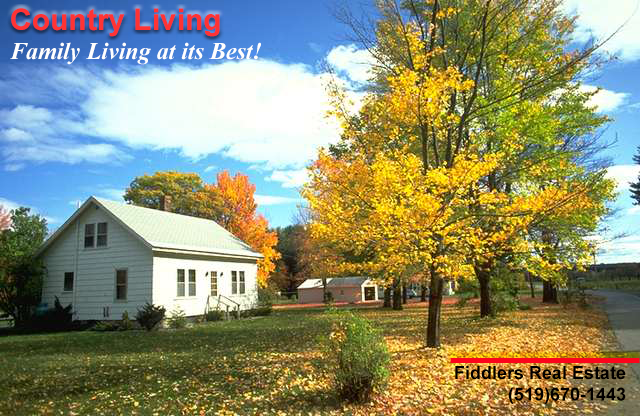
<style>
.page{position:relative;width:640px;height:416px}
.page>*{position:absolute;margin:0}
.t1{font:30px "Arial-BoldMT";color:#ff3333}
.t2{font:24px "TimesNewRomanPS-BoldItalicMT";color:#fefefe}
.t3{font:18px "Arial-BoldMT";color:#030000}
</style>
<div class="page">
<p class="t1" style="left:11px;top:8px;width:209px;height:29px">Country Living</p>
<p class="t2" style="left:10px;top:42px;width:251px;height:23px">Family Living at its Best!</p>
<p class="t3" style="left:455px;top:366px;width:171px;height:38px;text-align:right">Fiddlers Real Estate<br>(519)670-1443</p>
</div>
